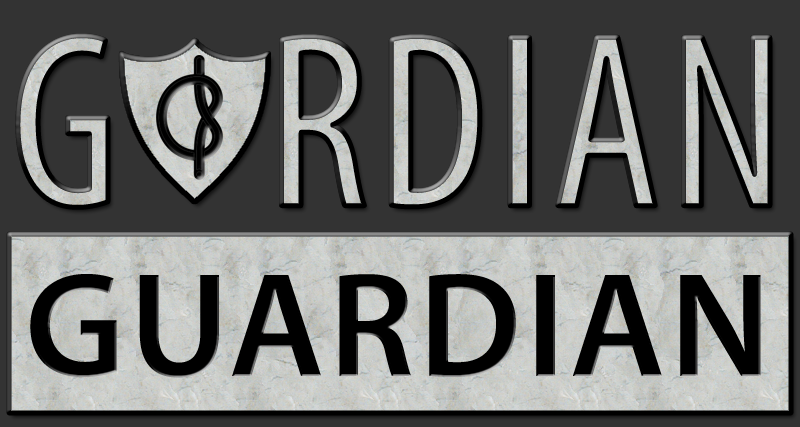
<style>
.page{position:relative;width:800px;height:427px;background:#333333}
.page>*{position:absolute;margin:0}
.t1{font:250px "MyriadPro-Cond";letter-spacing:0.03em}
.t2{font:150px "MyriadPro-Semibold";letter-spacing:0.03em;color:#000000}
</style>
<div class="page">
<p class="t1" style="left:17px;top:35px;width:753px;height:173px">G   RDIAN</p>
<p class="t2" style="left:30px;top:274px;width:731px;height:104px">GUARDIAN</p>
</div>
